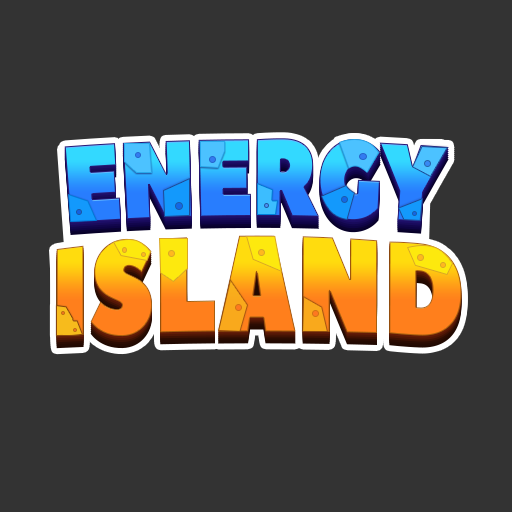
<style>
.page{position:relative;width:512px;height:512px;background:#333333}
.page>*{position:absolute;margin:0}
.t1{font:109.7px "PeaceSans";letter-spacing:-0.025em;scale:0.81 1}
.t2{font:123.7px "PeaceSans";scale:0.83 1}
</style>
<div class="page">
<p class="t1" style="left:64px;top:138px;width:385px;height:85px">ENERGY</p>
<p class="t2" style="left:56px;top:235px;width:406px;height:102px">ISLAND</p>
</div>
